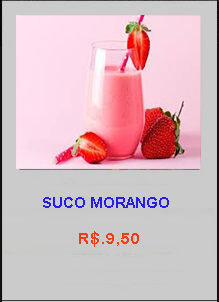
<style>
.page{position:relative;width:219px;height:302px;background:#cbcbcb}
.page>*{position:absolute;margin:0}
.t1{font:14.7px "Arial-BoldMT";color:#261cf4}
.t2{font:16px "ArialRoundedMTBold";color:#f33c12}
</style>
<div class="page">
<p class="t1" style="left:43px;top:197px;width:126px;height:11px">SUCO MORANGO</p>
<p class="t2" style="left:79px;top:231px;width:60px;height:16px">R$.9,50</p>
</div>
